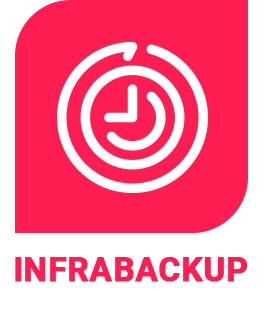
<style>
.page{position:relative;width:264px;height:314px;background:#ff1d52}
.page>*{position:absolute;margin:0}
.t1{font:33.4px "Roboto-Bold";color:#ff1d52;font-weight:bold}
</style>
<div class="page">
<p class="t1" style="left:15px;top:257px;width:233px;height:25px">INFRABACKUP</p>
</div>
